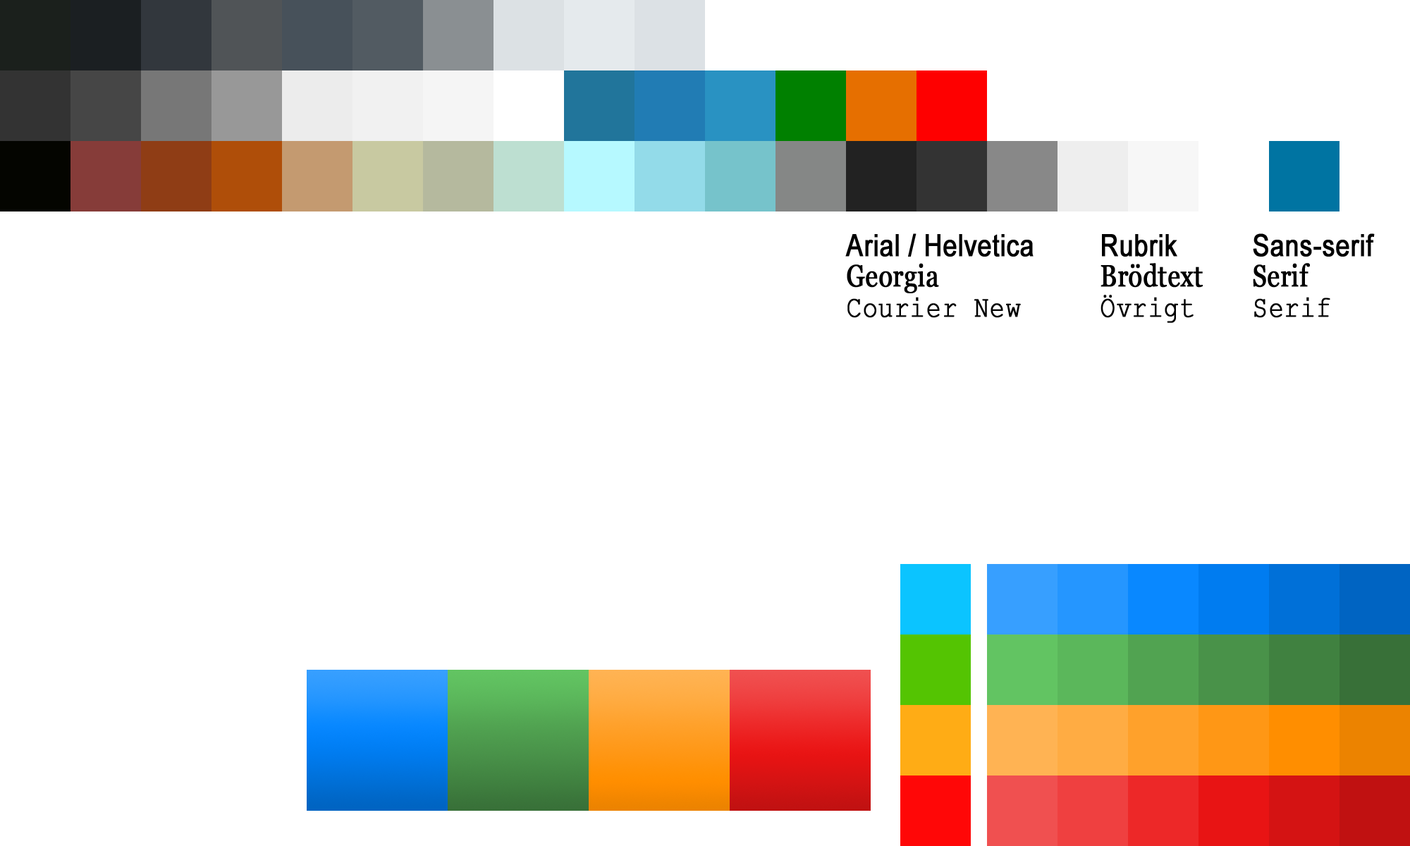
<style>
.page{position:relative;width:1410px;height:846px;background:#ffffff}
.page>*{position:absolute;margin:0}
.t1{font:30.5px "ArialMT";color:#000000;font-weight:bold;scale:0.83 1}
.t2{font:30.5px "Georgia";color:#000000;font-weight:bold;scale:0.83 1}
.t3{font:30.5px "CourierNewPSMT";color:#000000;font-weight:bold;scale:0.83 1}
</style>
<div class="page">
<p class="t1" style="left:845px;top:233px;width:530px;height:90px">Arial / Helvetica   Rubrik   Sans-serif<br><span class="t2">Georgia       Brödtext  Serif<br></span><span class="t3">Courier New    Övrigt   Serif</span></p>
</div>
